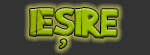
<style>
.page{position:relative;width:150px;height:55px;background:#333333}
.page>*{position:absolute;margin:0}
.t1{font:46px "Brady-Bunch"}
</style>
<div class="page">
<p class="t1" style="left:30px;top:8px;width:88px;height:30px">IESIRE</p>
</div>
